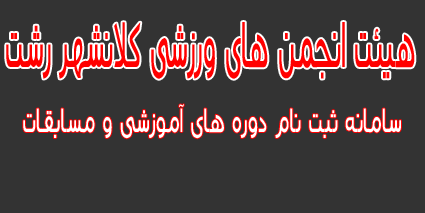
<style>
.page{position:relative;width:425px;height:213px;background:#333333}
.page>*{position:absolute;margin:0}
.t1{font:93.4px "Mj_Baseet";color:#ff0000;scale:0.4 1}
.t2{font:49.1px "Mj_Baseet";color:#ffffff;scale:0.6 1}
</style>
<div class="page">
<p class="t1" style="left:6px;top:22px;width:409px;height:57px">هیئت انجمن های ورزشی کلانشهر رشت</p>
<p class="t2" style="left:23px;top:104px;width:378px;height:35px">سامانه ثبت نام دوره های آموزشی و مسابقات</p>
</div>
